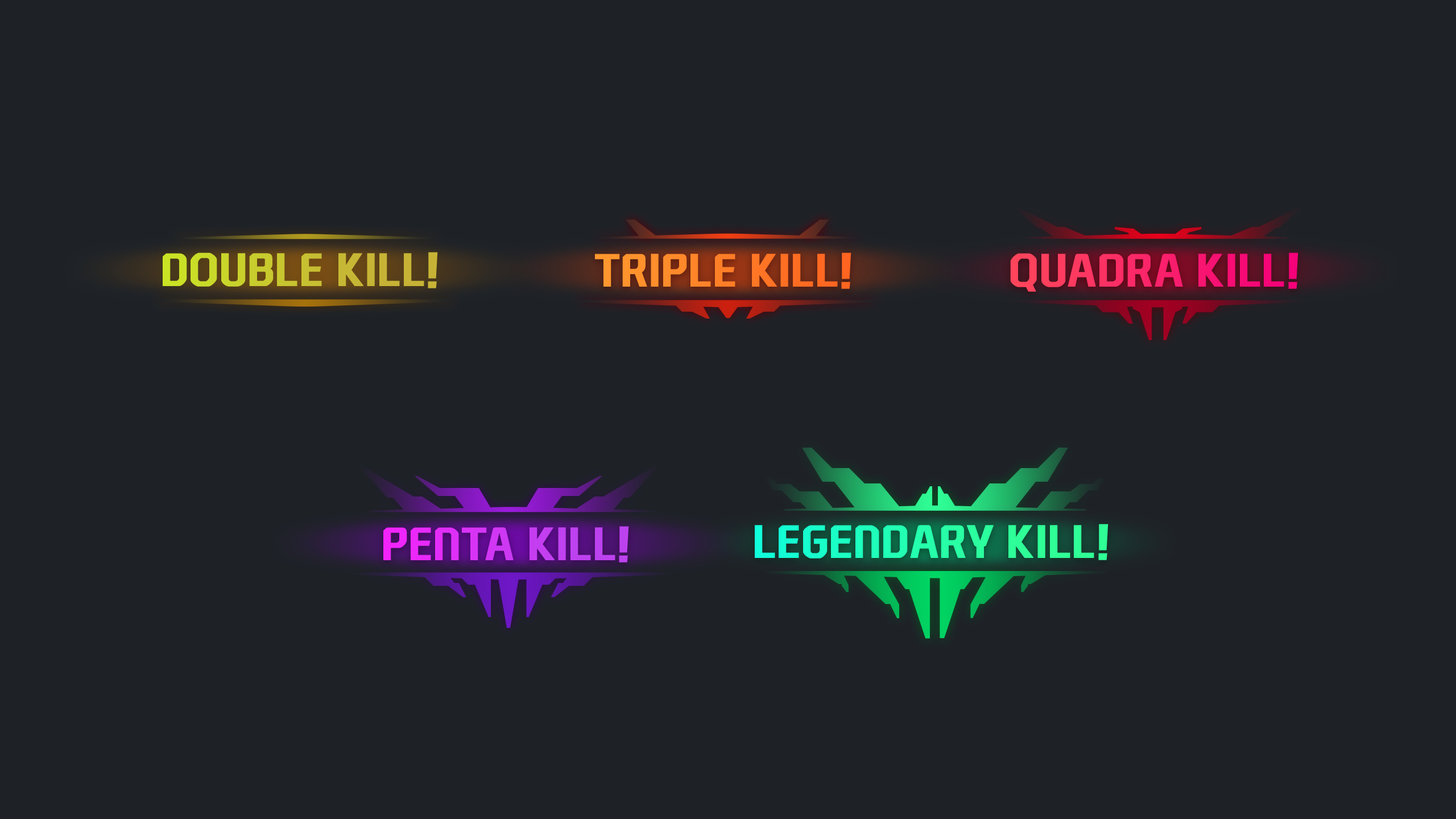
<style>
.page{position:relative;width:1456px;height:819px;background:#1e2227}
.page>*{position:absolute;margin:0}
.t1{font:44.4px "NEXONFootballGothicB";color:#c8c72f;text-transform:uppercase;font-weight:bold}
.t2{font:44.4px "NEXONFootballGothicB";color:#ff7f27;text-transform:uppercase;font-weight:bold}
.t3{font:44.4px "NEXONFootballGothicB";text-transform:uppercase;font-weight:bold}
.t4{font:44.4px "NEXONFootballGothicB";color:#d037f4;text-transform:uppercase;font-weight:bold}
</style>
<div class="page">
<p class="t1" style="left:163px;top:252px;width:275px;height:36px">double kill!</p>
<p class="t2" style="left:595px;top:253px;width:256px;height:36px">triple kill!</p>
<p class="t3" style="left:1010px;top:253px;width:288px;height:39px">quadra kill!</p>
<p class="t4" style="left:383px;top:526px;width:246px;height:36px">penta kill!</p>
<p class="t3" style="left:755px;top:524px;width:353px;height:36px">legendary kill!</p>
</div>
